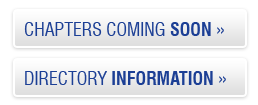
<style>
.page{position:relative;width:258px;height:105px;background:#ffffff}
.page>*{position:absolute;margin:0}
.t1{font:18px "Swiss721BT-RomanCondensed";color:#1c3f95;text-transform:uppercase}
.t2{font:18px "Swiss721BT-BoldCondensed";color:#1c3f95;text-transform:uppercase}
</style>
<div class="page">
<p class="t1" style="left:24px;top:22px;width:200px;height:14px">CHAPTERS COMING <span class="t2">SOON </span>»</p>
<p class="t2" style="left:25px;top:71px;width:201px;height:14px"><span class="t1">DIRECTORY </span>INFORMATION<span class="t1"> »</span></p>
</div>
